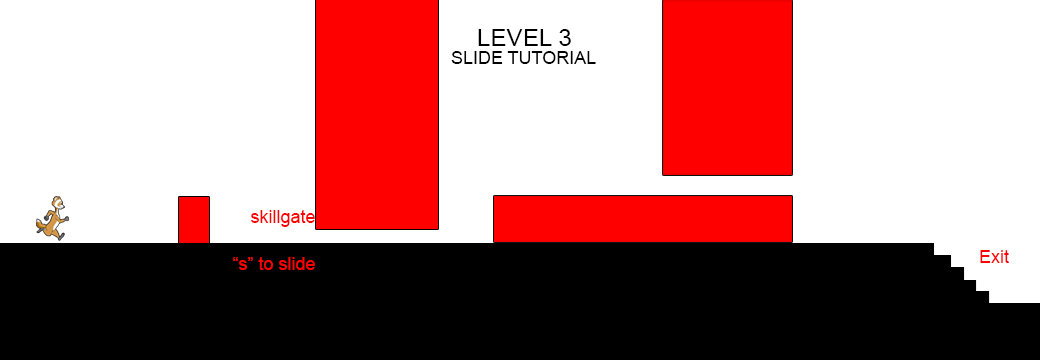
<style>
.page{position:relative;width:1040px;height:360px;background:#ffffff}
.page>*{position:absolute;margin:0}
.t1{font:24px "ArialMT";color:#000000}
.t2{font:18px "ArialMT";color:#000000}
.t3{font:18px "ArialMT";color:#ff0000}
</style>
<div class="page">
<p class="t1" style="left:478px;top:29px;width:93px;height:17px">LEVEL 3</p>
<p class="t2" style="left:451px;top:51px;width:145px;height:13px">SLIDE TUTORIAL</p>
<p class="t3" style="left:251px;top:210px;width:64px;height:17px">skillgate</p>
<p class="t3" style="left:233px;top:257px;width:82px;height:13px">“s” to slide</p>
<p class="t3" style="left:980px;top:250px;width:29px;height:13px">Exit</p>
</div>
